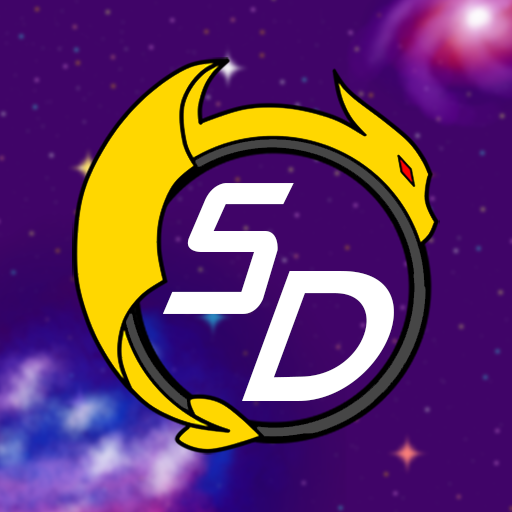
<style>
.page{position:relative;width:512px;height:512px;background:#400468}
.page>*{position:absolute;margin:0}
.t1{font:199px "ParkwayHotel";color:#ffffff}
</style>
<div class="page">
<p class="t1" style="left:162px;top:183px;width:132px;height:131px">S</p>
<p class="t1" style="left:242px;top:271px;width:152px;height:130px">D</p>
</div>
